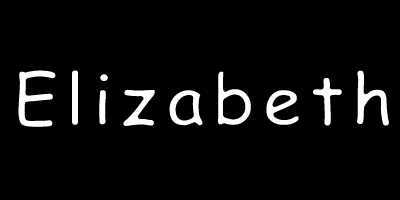
<style>
.page{position:relative;width:400px;height:200px;background:#000000}
.page>*{position:absolute;margin:0}
.t1{font:72px "ComicSansMS-Bold";letter-spacing:0.1em}
</style>
<div class="page">
<p class="t1" style="left:16px;top:68px;width:375px;height:61px">Elizabeth</p>
</div>
